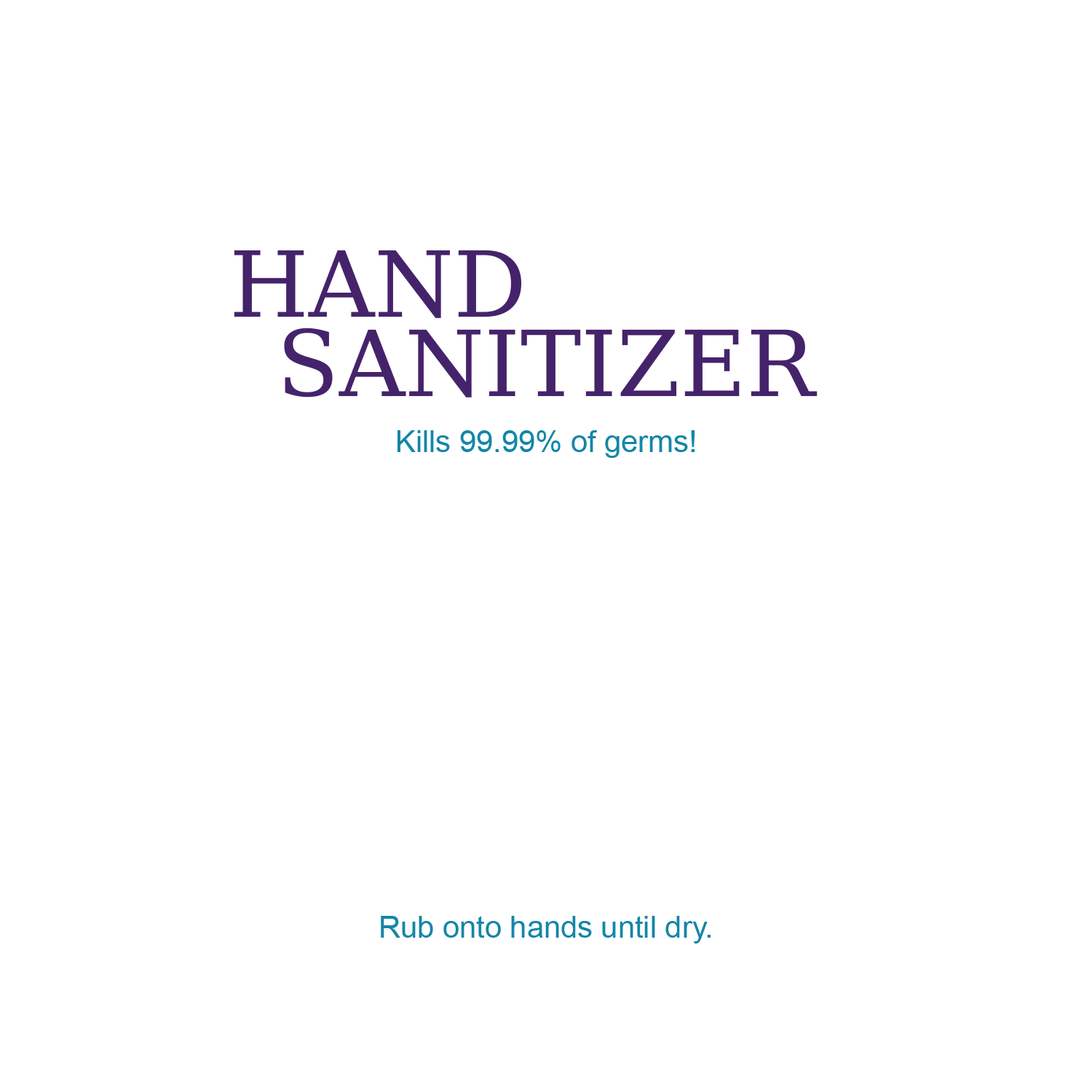
<style>
.page{position:relative;width:1092px;height:1092px;background:#ffffff}
.page>*{position:absolute;margin:0}
.t1{font:91px "DejaVuMathTeXGyre-Regular";color:#45236b}
.t2{font:30.3px "ArialMT";color:#1486a7}
</style>
<div class="page">
<p class="t1" style="left:234px;top:250px;width:287px;height:68px">HAND</p>
<p class="t1" style="left:284px;top:328px;width:534px;height:69px">SANITIZER</p>
<p class="t2" style="left:397px;top:430px;width:298px;height:28px">Kills 99.99% of germs!</p>
<p class="t2" style="left:381px;top:916px;width:330px;height:27px">Rub onto hands until dry.</p>
</div>
